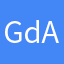
<style>
.page{position:relative;width:64px;height:64px;background:#4287f5}
.page>*{position:absolute;margin:0}
.t1{font:29.2px "NotoSansCJKtc-DemiLight";color:#ffffff}
</style>
<div class="page">
<p class="t1" style="left:5px;top:20px;width:54px;height:23px">GdA</p>
</div>
